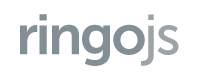
<style>
.page{position:relative;width:200px;height:80px;background:#ffffff}
.page>*{position:absolute;margin:0}
.t1{font:56.2px "MuseoSans-700";letter-spacing:-0.045em;color:#828f95}
.t2{font:56.2px "MuseoSans-500";letter-spacing:-0.045em;color:#9ca4a7}
</style>
<div class="page">
<p class="t1" style="left:20px;top:14px;width:159px;height:52px">ringo<span class="t2">js</span></p>
</div>
